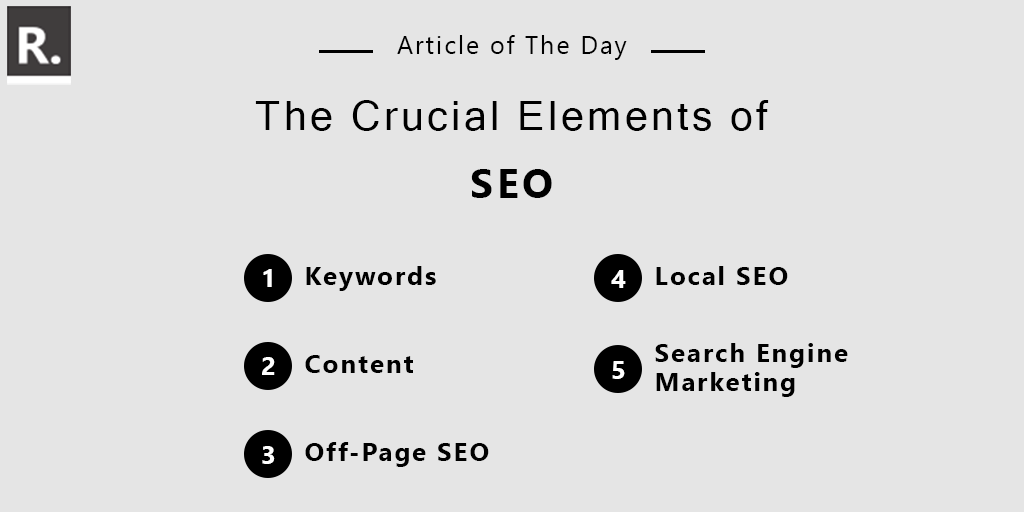
<style>
.page{position:relative;width:1024px;height:512px;background:#e5e5e5}
.page>*{position:absolute;margin:0}
.t1{font:25px "SegoeUI";letter-spacing:0.08em;color:#000000}
.t2{font:41.3px/68.6px "MicrosoftSansSerif";letter-spacing:0.08em;color:#000000}
.t3{font:41.3px/68.6px "SegoeUI-Bold";letter-spacing:0.08em;color:#000000}
.t4{font:25.6px "SegoeUI-Bold";letter-spacing:0.08em;color:#ffffff}
.t5{font:25.6px "SegoeUI-Bold";letter-spacing:0.08em;color:#000000}
.t6{font:25.6px/28.9px "SegoeUI-Bold";letter-spacing:0.08em;color:#000000}
</style>
<div class="page">
<p class="t1" style="left:397px;top:35px;width:230px;height:25px">Article of The Day</p>
<p class="t2" style="left:255px;top:100px;width:514px;height:98px;text-align:center">The Crucial Elements of <span class="t3">SEO</span></p>
<p class="t4" style="left:263px;top:269px;width:9px;height:18px">1</p>
<p class="t5" style="left:306px;top:266px;width:130px;height:25px">Keywords</p>
<p class="t4" style="left:611px;top:270px;width:15px;height:18px">4</p>
<p class="t5" style="left:656px;top:266px;width:132px;height:19px">Local SEO</p>
<p class="t6" style="left:655px;top:343px;width:193px;height:54px;text-align:right">Search Engine <br>Marketing</p>
<p class="t4" style="left:262px;top:357px;width:13px;height:18px">2</p>
<p class="t5" style="left:305px;top:355px;width:108px;height:18px">Content</p>
<p class="t4" style="left:612px;top:361px;width:13px;height:18px">5</p>
<p class="t4" style="left:262px;top:446px;width:13px;height:18px">3</p>
<p class="t5" style="left:305px;top:442px;width:184px;height:25px">Off-Page SEO</p>
</div>
